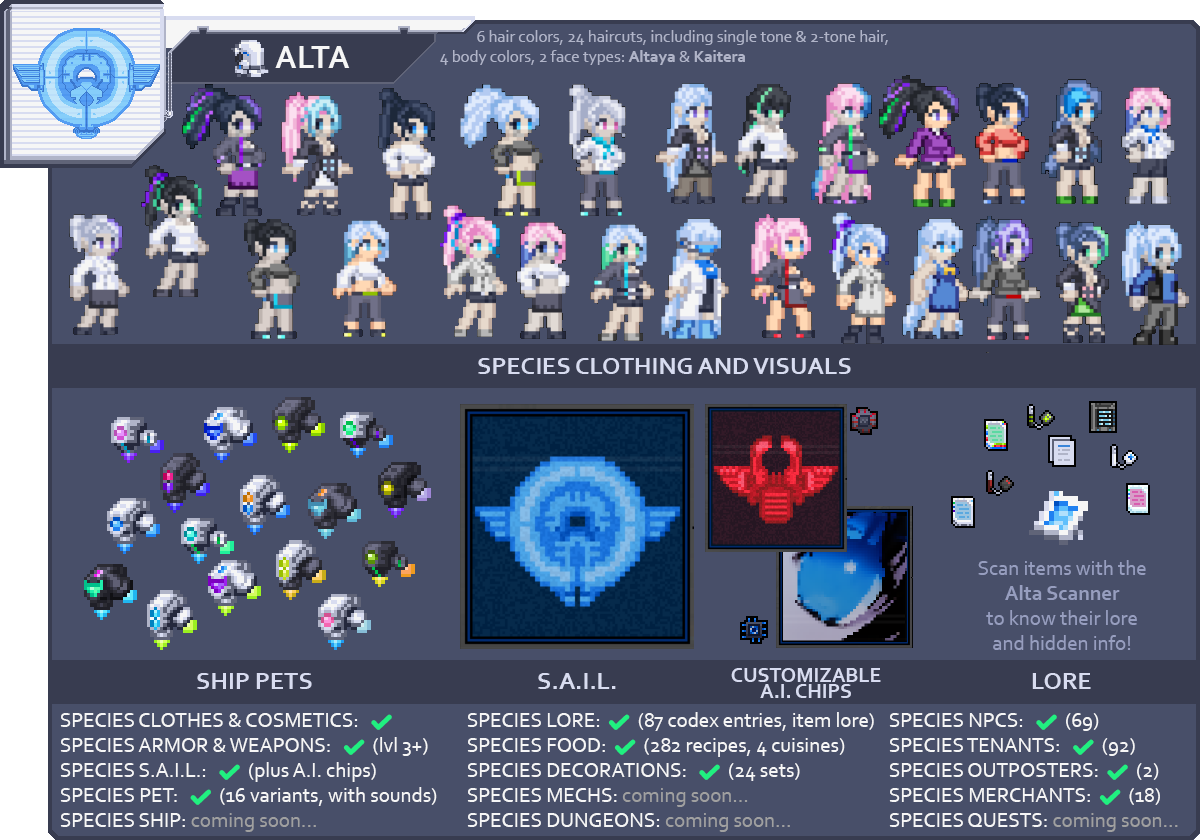
<style>
.page{position:relative;width:1200px;height:840px;background:#484f69}
.page>*{position:absolute;margin:0}
.t1{font:16.7px "Corbel";color:#b0b4c8}
.t2{font:16.7px "Corbel-Bold";color:#b0b4c8}
.t3{font:33.3px "Corbel-Bold";color:#f6f6f6}
.t4{font:25px "Corbel-Bold";color:#d8dcf0}
.t5{font:20.8px/25px "Corbel";color:#979ebf}
.t6{font:20.8px/25px "Corbel-Bold";color:#979ebf}
.t7{font:20.8px/16.7px "Corbel-Bold";color:#d8dcf0}
.t8{font:20.8px "Corbel";color:#f6f6f6}
.t9{font:20.8px "SegoeUIEmoji";color:#20f080}
.t10{font:20.8px "Corbel";color:#a0a0a0}
</style>
<div class="page">
<p class="t1" style="left:440px;top:30px;width:448px;height:35px">6 hair colors, 24 haircuts, including single tone &amp; 2-tone hair,<br>4 body colors, 2 face types: <span class="t2">Altaya</span> &amp; <span class="t2">Kaitera</span></p>
<p class="t3" style="left:275px;top:46px;width:75px;height:22px">ALTA</p>
<p class="t4" style="left:478px;top:358px;width:373px;height:16px">SPECIES CLOTHING AND VISUALS</p>
<p class="t5" style="left:978px;top:560px;width:168px;height:90px;text-align:center">Scan items with the<br><span class="t6">Alta Scanner<br></span>to know their lore<br>and hidden info!</p>
<p class="t4" style="left:197px;top:673px;width:115px;height:16px">SHIP PETS</p>
<p class="t4" style="left:538px;top:673px;width:78px;height:16px">S.A.I.L.</p>
<p class="t7" style="left:731px;top:668px;width:150px;height:30px;text-align:center">CUSTOMIZABLE<br>A.I. CHIPS</p>
<p class="t4" style="left:1032px;top:673px;width:59px;height:16px">LORE</p>
<p class="t8" style="left:60px;top:713px;width:377px;height:119px">SPECIES CLOTHES &amp; COSMETICS:  <span class="t9">✔<br></span>SPECIES ARMOR &amp; WEAPONS:  <span class="t9">✔</span> (lvl 3+)<br>SPECIES S.A.I.L.:  <span class="t9">✔</span> (plus A.I. chips)<br>SPECIES PET:  <span class="t9">✔</span> (16 variants, with sounds)<br>SPECIES SHIP: <span class="t10">coming soon...</span></p>
<p class="t8" style="left:467px;top:712px;width:407px;height:120px">SPECIES LORE: <span class="t9">✔</span> (87 codex entries, item lore)<br>SPECIES FOOD: <span class="t9">✔</span> (282 recipes, 4 cuisines)<br>SPECIES DECORATIONS:  <span class="t9">✔</span> (24 sets)<br>SPECIES MECHS: <span class="t10">coming soon...<br></span>SPECIES DUNGEONS: <span class="t10">coming soon...</span></p>
<p class="t8" style="left:889px;top:713px;width:289px;height:119px">SPECIES NPCS:  <span class="t9">✔</span> (69)<br>SPECIES TENANTS:  <span class="t9">✔</span> (92)<br>SPECIES OUTPOSTERS: <span class="t9">✔</span> (2)<br>SPECIES MERCHANTS: <span class="t9">✔</span> (18)<br>SPECIES QUESTS: <span class="t10">coming soon...</span></p>
</div>
